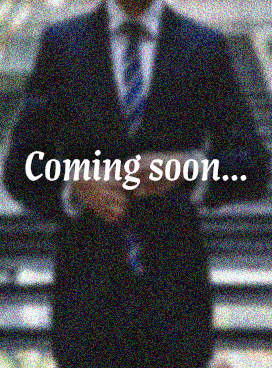
<style>
.page{position:relative;width:272px;height:368px}
.page>*{position:absolute;margin:0}
.t1{font:40px "ArtigoDisplay-Medium";color:#fcfafa}
</style>
<div class="page">
<p class="t1" style="left:25px;top:149px;width:222px;height:41px">Coming soon...</p>
</div>
